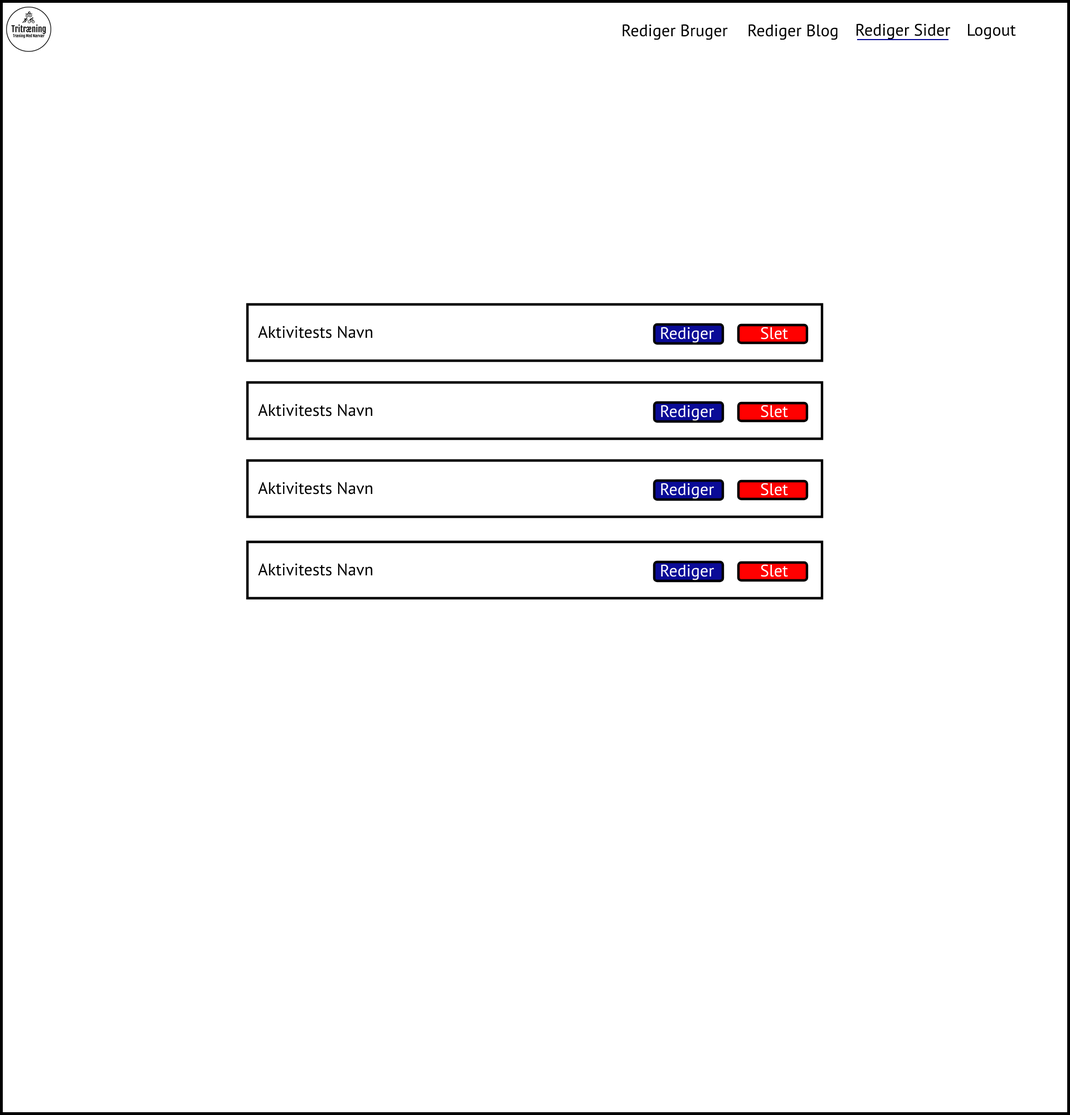
<style>
.page{position:relative;width:1070px;height:1115px;background:#ffffff}
.page>*{position:absolute;margin:0}
.t1{font:16.7px "MyriadPro-Regular";color:#000000}
.t2{font:16.7px "MyriadPro-Regular";color:#ffffff}
</style>
<div class="page">
<p class="t1" style="left:622px;top:24px;width:106px;height:16px">Rediger Bruger</p>
<p class="t1" style="left:748px;top:24px;width:90px;height:16px">Rediger Blog</p>
<p class="t1" style="left:856px;top:23px;width:95px;height:17px">Rediger Sider</p>
<p class="t1" style="left:968px;top:24px;width:48px;height:16px">Logout</p>
<p class="t1" style="left:258px;top:325px;width:115px;height:13px">Aktivitests Navn</p>
<p class="t2" style="left:661px;top:327px;width:53px;height:16px">Rediger</p>
<p class="t2" style="left:761px;top:327px;width:27px;height:12px">Slet</p>
<p class="t1" style="left:258px;top:403px;width:115px;height:13px">Aktivitests Navn</p>
<p class="t2" style="left:661px;top:405px;width:53px;height:16px">Rediger</p>
<p class="t2" style="left:761px;top:405px;width:27px;height:12px">Slet</p>
<p class="t1" style="left:258px;top:481px;width:115px;height:13px">Aktivitests Navn</p>
<p class="t2" style="left:661px;top:483px;width:53px;height:16px">Rediger</p>
<p class="t2" style="left:761px;top:483px;width:27px;height:12px">Slet</p>
<p class="t1" style="left:258px;top:563px;width:115px;height:13px">Aktivitests Navn</p>
<p class="t2" style="left:661px;top:564px;width:53px;height:16px">Rediger</p>
<p class="t2" style="left:761px;top:564px;width:27px;height:13px">Slet</p>
</div>
